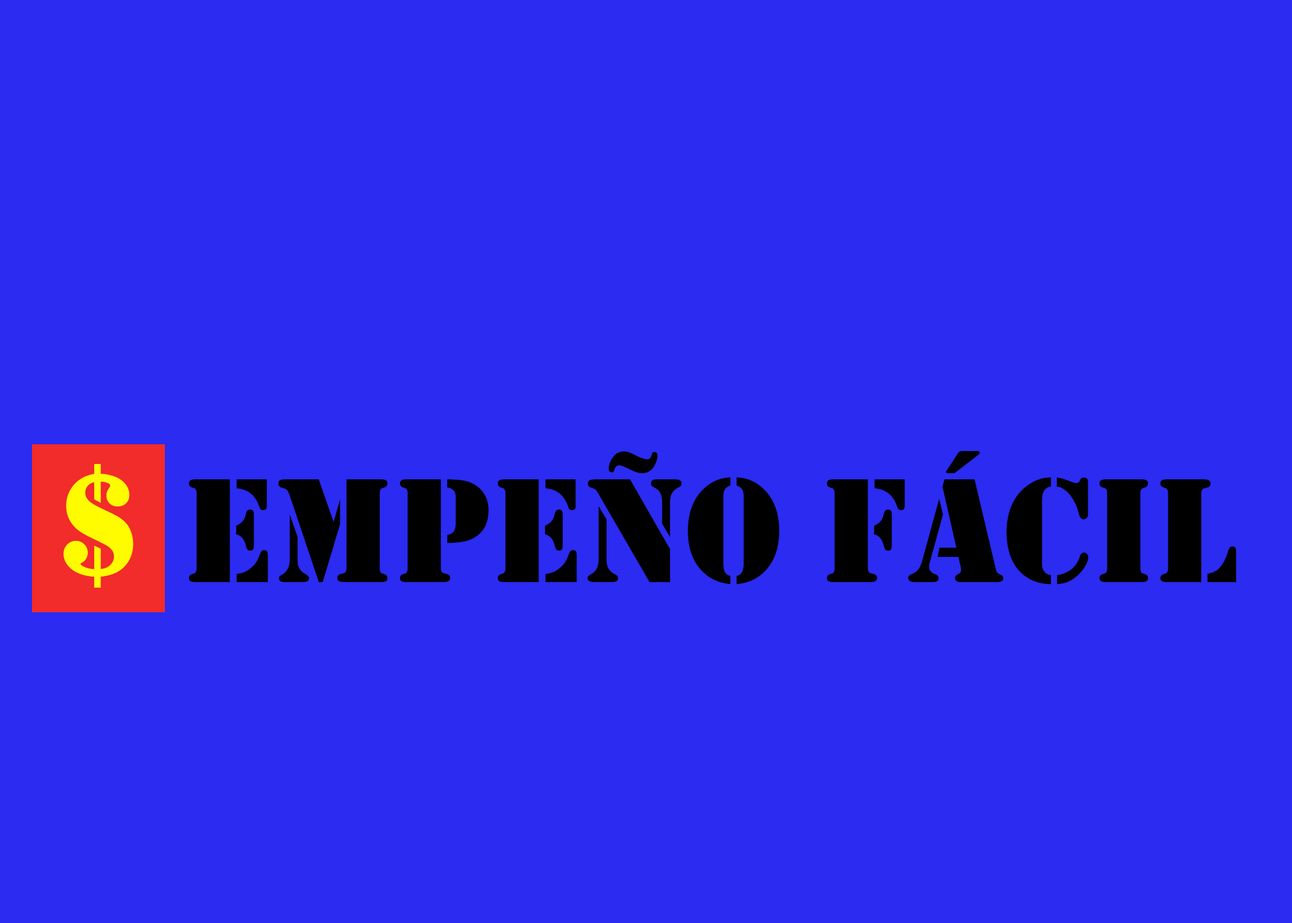
<style>
.page{position:relative;width:1292px;height:923px;background:#2b2bf2}
.page>*{position:absolute;margin:0}
.t1{font:153.8px "Stencil";color:#000000}
.t2{font:153.8px "Stencil";color:#fffc00}
</style>
<div class="page">
<p class="t1" style="left:189px;top:451px;width:1048px;height:134px">EMPEÑO FÁCIL</p>
<p class="t2" style="left:63px;top:464px;width:71px;height:124px">$</p>
</div>
